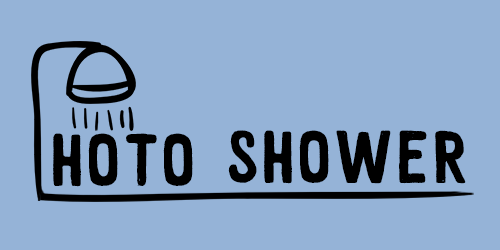
<style>
.page{position:relative;width:500px;height:250px;background:#95b3d7}
.page>*{position:absolute;margin:0}
.t1{font:75px "Whitewood";color:#000000}
</style>
<div class="page">
<p class="t1" style="left:53px;top:133px;width:140px;height:54px">hoto</p>
<p class="t1" style="left:228px;top:130px;width:238px;height:54px">Shower</p>
</div>
